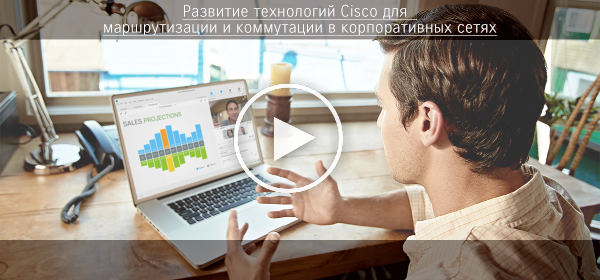
<style>
.page{position:relative;width:600px;height:280px}
.page>*{position:absolute;margin:0}
.t1{font:16px/16px "CiscoScreen-Light";letter-spacing:0.025em;color:#ffffff;text-decoration:underline}
</style>
<div class="page">
<p class="t1" style="left:103px;top:4px;width:394px;height:32px;text-align:center">Развитие технологий Cisco для  <br>маршрутизации и коммутации в корпоративных сетях</p>
</div>
